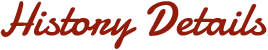
<style>
.page{position:relative;width:268px;height:50px;background:#ffffff}
.page>*{position:absolute;margin:0}
.t1{font:48px "Damion";color:#931b0c}
</style>
<div class="page">
<p class="t1" style="left:0px;top:1px;width:267px;height:48px">History Details</p>
</div>
